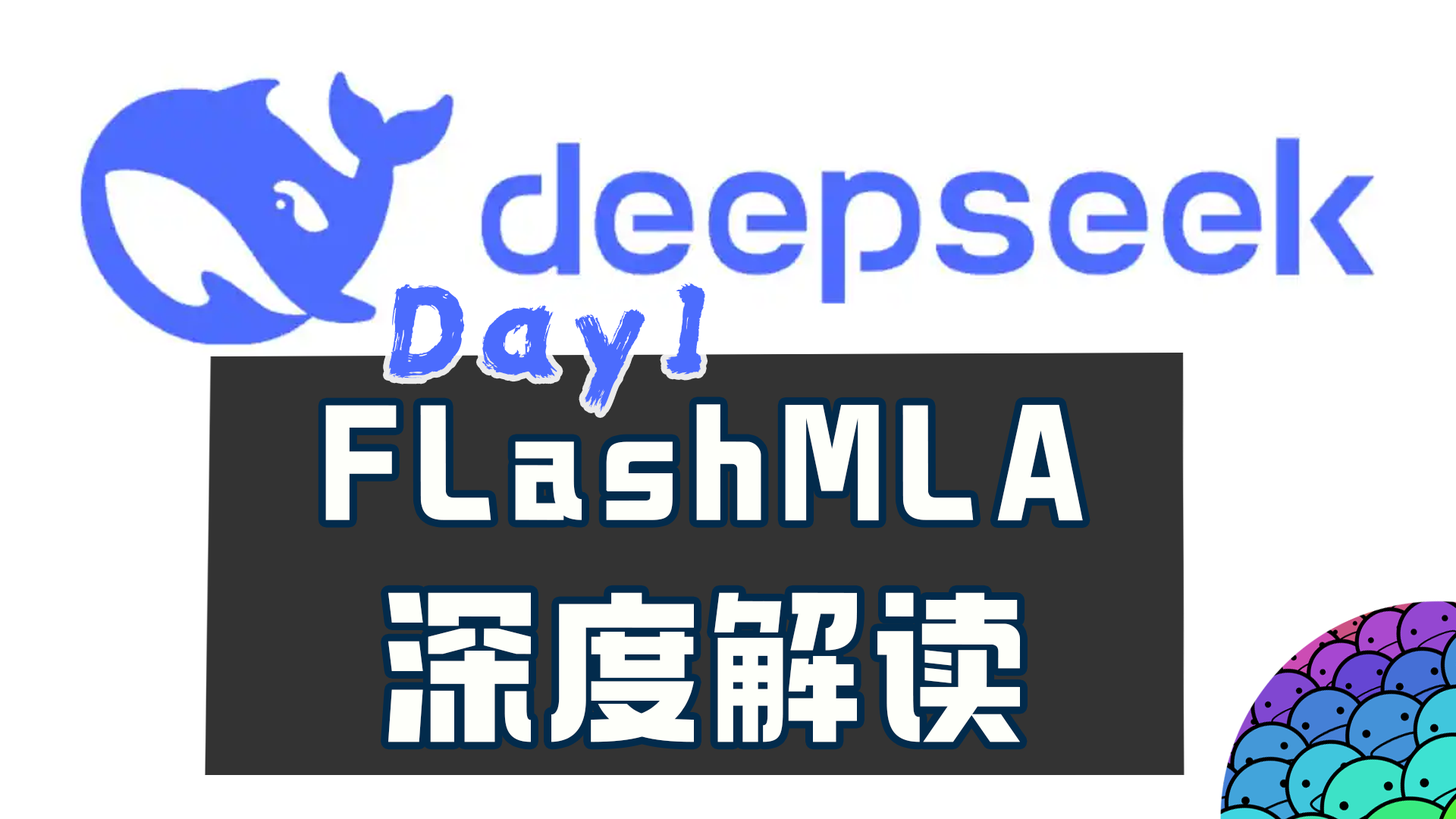
<style>
.page{position:relative;width:1456px;height:819px;background:#ffffff}
.page>*{position:absolute;margin:0}
.t1{font:121.3px "REEJI-CHAO-BeiMingGBT-Flash";letter-spacing:0.05em;color:#4c6cfd}
.t2{font:166.8px/204.7px "098-";letter-spacing:0.05em;color:#fefffa}
</style>
<div class="page">
<p class="t1" style="left:388px;top:282px;width:317px;height:131px;rotate:-1deg">Day1</p>
<p class="t2" style="left:325px;top:404px;width:758px;height:338px;text-align:center">FLashMLA<br>深度解读</p>
</div>
